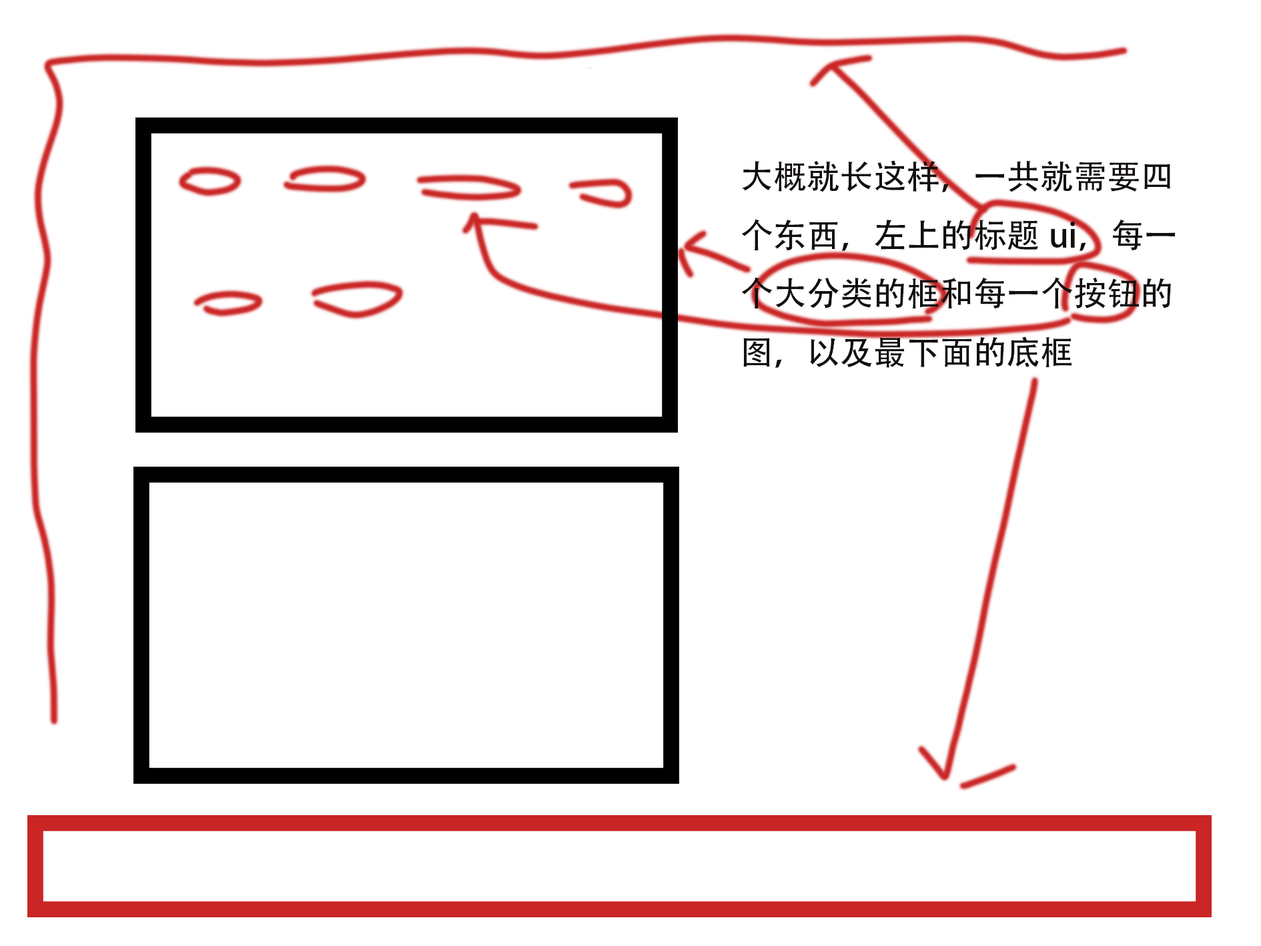
<style>
.page{position:relative;width:1261px;height:946px;background:#ffffff}
.page>*{position:absolute;margin:0}
.t1{font:33.4px "AdobeHeitiStd-Regular";color:#130e0e}
</style>
<div class="page">
<p class="t1" style="left:741px;top:160px;width:434px;height:208px">大概就长这样，一共就需要四个东西，左上的标题ui，每一个大分类的框和每一个按钮的图，以及最下面的底框</p>
</div>
